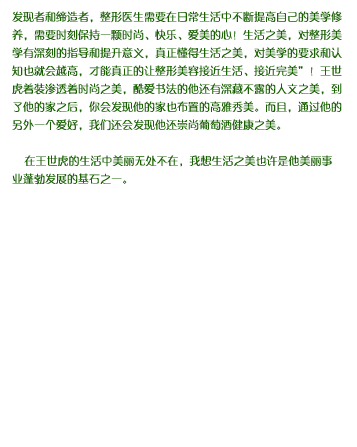
<style>
.page{position:relative;width:357px;height:447px;background:#ffffff}
.page>*{position:absolute;margin:0}
.t1{font:11px/18px "FZZQJW--GB1-0";color:#196003}
</style>
<div class="page">
<p class="t1" style="left:12px;top:11px;width:330px;height:174px">发现者和缔造者，整形医生需要在日常生活中不断提高自己的美学修养，需要时刻保持一颗时尚、快乐、爱美的心！生活之美，对整形美学有深刻的指导和提升意义，真正懂得生活之美，对美学的要求和认知也就会越高，才能真正的让整形美容接近生活、接近完美”！王世虎着装渗透着时尚之美，酷爱书法的他还有深藏不露的人文之美，到了他的家之后，你会发现他的家也布置的高雅秀美。而且，通过他的另外一个爱好，我们还会发现他还崇尚葡萄酒健康之美。<br><br>    在王世虎的生活中美丽无处不在，我想生活之美也许是他美丽事业蓬勃发展的基石之一。</p>
</div>
